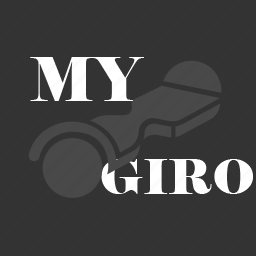
<style>
.page{position:relative;width:256px;height:256px;background:#333333}
.page>*{position:absolute;margin:0}
.t1{font:60px "Elephant-Regular";color:#ffffff}
.t2{font:48px "Elephant-Regular";color:#ffffff}
</style>
<div class="page">
<p class="t1" style="left:30px;top:57px;width:114px;height:44px">MY</p>
<p class="t2" style="left:101px;top:159px;width:152px;height:35px">GIRO</p>
</div>
